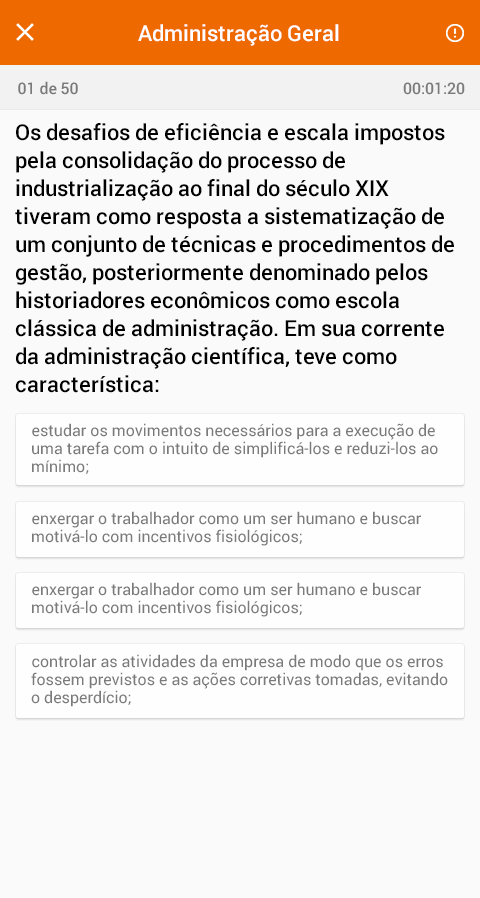
<style>
.page{position:relative;width:480px;height:898px;background:#fafafa}
.page>*{position:absolute;margin:0}
.t1{font:22px "Roboto-Medium";color:#ffffff}
.t2{font:16px "Roboto-Medium";color:#7a7a7a}
.t3{font:22px/28px "Roboto-Medium";color:#000000}
.t4{font:16px/18px "Roboto-Regular";color:#7a7a7a}
</style>
<div class="page">
<p class="t1" style="left:138px;top:24px;width:201px;height:22px">Administração Geral</p>
<p class="t2" style="left:18px;top:81px;width:60px;height:14px">01 de 50</p>
<p class="t2" style="left:403px;top:82px;width:62px;height:13px">00:01:20</p>
<p class="t3" style="left:15px;top:123px;width:439px;height:270px">Os desafios de eficiência e escala impostos <br>pela consolidação do processo de <br>industrialização ao final do século XIX <br>tiveram como resposta a sistematização de <br>um conjunto de técnicas e procedimentos de <br>gestão, posteriormente denominado pelos <br>historiadores econômicos como escola <br>clássica de administração. Em sua corrente <br>da administração científica, teve como <br>característica:</p>
<p class="t4" style="left:32px;top:423px;width:406px;height:51px">estudar os movimentos necessários para a execução de uma tarefa com o intuito de simplificá-los e reduzi-los ao mínimo;</p>
<p class="t4" style="left:32px;top:511px;width:389px;height:35px">enxergar o trabalhador como um ser humano e buscar motivá-lo com incentivos fisiológicos;</p>
<p class="t4" style="left:32px;top:582px;width:389px;height:35px">enxergar o trabalhador como um ser humano e buscar motivá-lo com incentivos fisiológicos;</p>
<p class="t4" style="left:31px;top:654px;width:417px;height:53px">controlar as atividades da empresa de modo que os erros fossem previstos e as ações corretivas tomadas, evitando o desperdício;</p>
</div>
